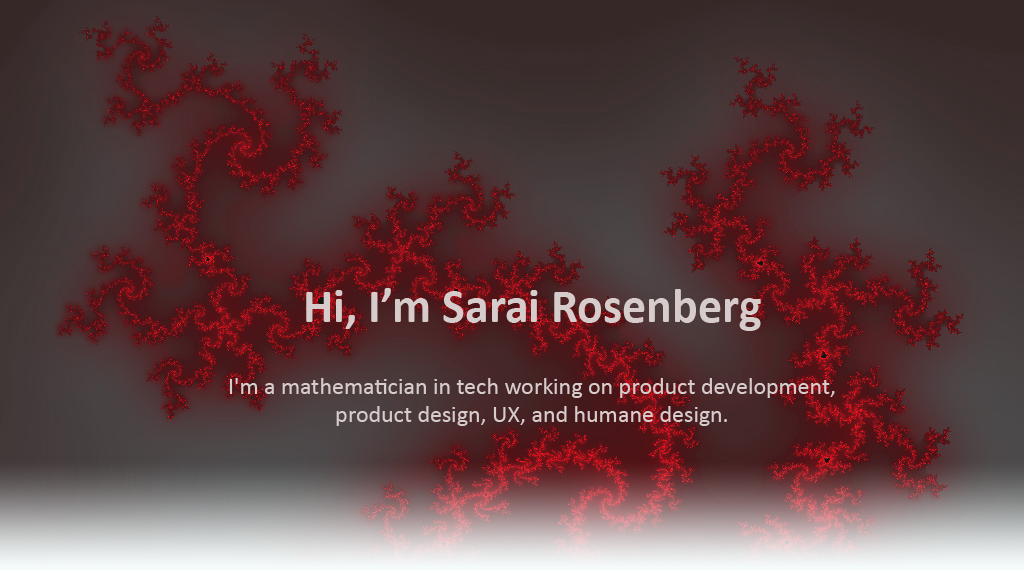
<style>
.page{position:relative;width:1024px;height:570px}
.page>*{position:absolute;margin:0}
.t1{font:24px "Calibri";color:#d7cccc}
.t2{font:48px "Calibri-Bold";color:#d7cccc}
</style>
<div class="page">
<p class="t1" style="left:229px;top:288px;width:606px;height:138px;text-align:center"><span class="t2">Hi, I’m Sarai Rosenberg<br><br></span>I'm a mathematician in tech working on product development,<br>product design, UX, and humane design.</p>
</div>
